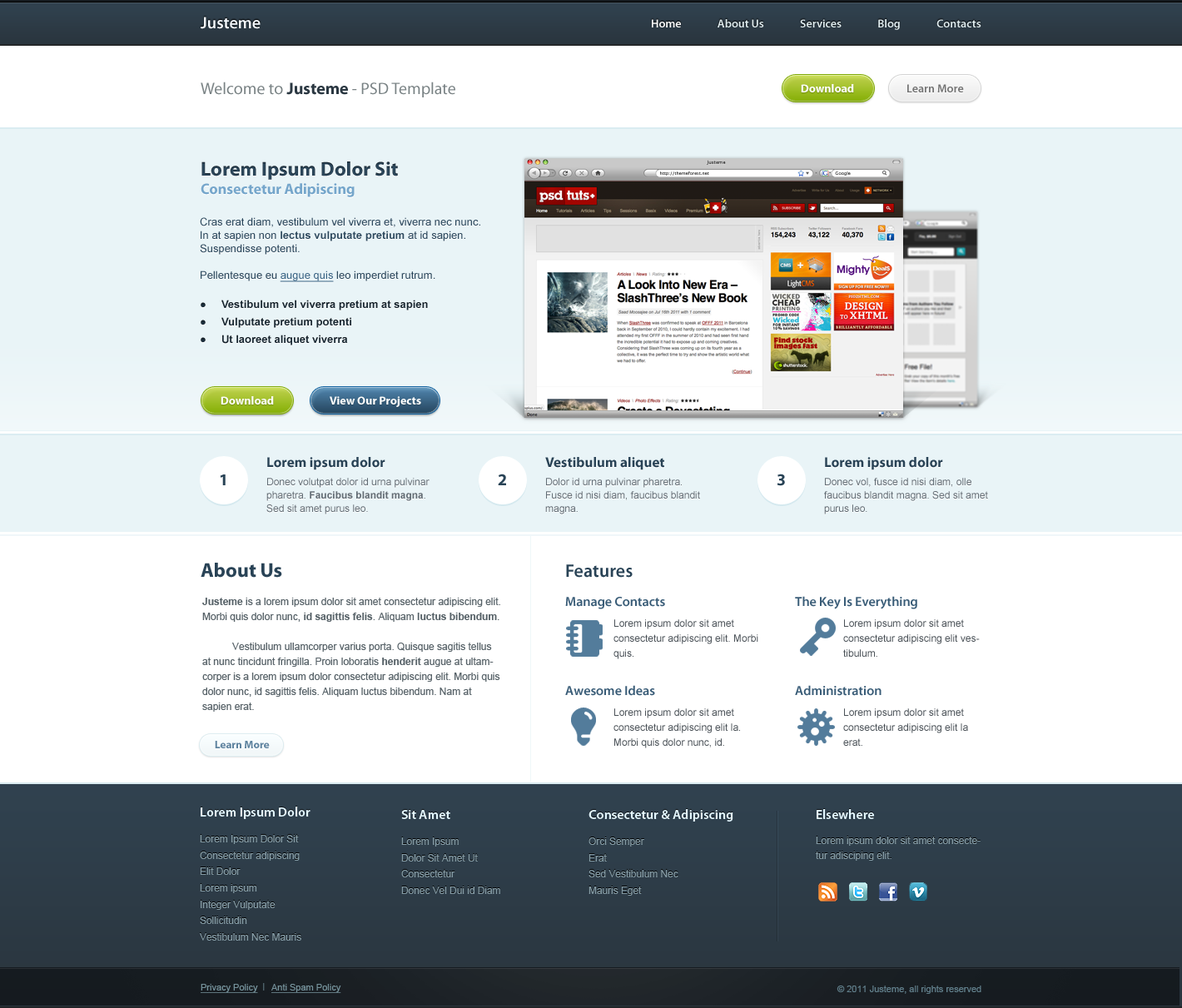
<style>
.page{position:relative;width:1182px;height:1008px;background:#ffffff}
.page>*{position:absolute;margin:0}
.t1{font:16.7px "MyriadPro-Semibold";color:#f5faff}
.t2{font:11.7px "MyriadPro-Semibold";color:#e0edf0}
.t3{font:11.7px "MyriadPro-Semibold";color:#ffffff}
.t4{font:16.7px "MyriadPro-Regular";color:#798284}
.t5{font:16.7px "MyriadPro-Bold";color:#2b3842}
.t6{font:11.7px "MyriadPro-Bold";color:#fffffe}
.t7{font:11.7px "MyriadPro-Semibold";color:#727272}
.t8{font:20px "MyriadPro-Bold";color:#2d495e}
.t9{font:4.8px "LucidaGrande"}
.t10{font:4.4px "LucidaGrande"}
.t11{font:15px "MyriadPro-Bold";color:#75a6cb}
.t12{font:10.8px/13.3px "ArialMT";color:#2d495e}
.t13{font:10.8px/13.3px "Arial-BoldMT";color:#2d495e}
.t14{font:10.8px/13.3px "ArialMT";color:#3a6585;text-decoration:underline}
.t15{font:10.8px/17.5px "Arial-BoldMT";color:#1c2f3d}
.t16{font:14.2px "MyriadPro-Bold";color:#294356}
.t17{font:16.7px "MyriadPro-Bold";color:#294356}
.t18{font:10px/13.3px "ArialMT";color:#636d75}
.t19{font:10px/13.3px "Arial-BoldMT";color:#636d75}
.t20{font:20px "MyriadPro-Bold";color:#294356}
.t21{font:18.3px "MyriadPro-Semibold";color:#294356}
.t22{font:10px/15px "ArialMT";color:#586369}
.t23{font:10px/15px "Arial-BoldMT";color:#586369}
.t24{font:13.3px "MyriadPro-Semibold";color:#395c77}
.t25{font:10px/15px "ArialMT";color:#4b5258}
.t26{font:10.8px "MyriadPro-Bold";color:#5e839f}
.t27{font:13.3px "MyriadPro-Semibold";color:#e3f7ff}
.t28{font:10px "ArialMT";color:#869da7}
.t29{font:10px/15px "ArialMT";color:#869da7}
.t30{font:9.2px "ArialMT";color:#76939c;text-decoration:underline}
.t31{font:10px "ArialMT";color:#4d636a}
.t32{font:9.2px "ArialMT";color:#617f8b}
</style>
<div class="page">
<p class="t1" style="left:201px;top:17px;width:60px;height:12px">Justeme</p>
<p class="t2" style="left:652px;top:19px;width:330px;height:11px"><span class="t3">Home </span>              About Us               Services               Blog               Contacts</p>
<p class="t4" style="left:201px;top:82px;width:254px;height:15px">Welcome to <span class="t5">Justeme</span> - PSD Template</p>
<p class="t6" style="left:801px;top:84px;width:53px;height:8px">Download</p>
<p class="t7" style="left:908px;top:84px;width:56px;height:8px">Learn More</p>
<p class="t8" style="left:202px;top:162px;width:196px;height:18px">Lorem Ipsum Dolor Sit</p>
<p class="t9" style="left:707px;top:160px;width:19px;height:5px">Justeme</p>
<p class="t10" style="left:660px;top:172px;width:49px;height:4px">http://themeforest.net</p>
<p class="t10" style="left:835px;top:172px;width:16px;height:4px">Google</p>
<p class="t11" style="left:201px;top:183px;width:154px;height:14px">Consectetur Adipiscing</p>
<p class="t12" style="left:200px;top:217px;width:280px;height:65px">Cras erat diam, vestibulum vel viverra et, viverra nec nunc. In at sapien non<span class="t13"> lectus vulputate pretium</span> at id sapien. Suspendisse potenti.<br><br>Pellentesque eu <span class="t14">augue quis</span> leo imperdiet rutrum.</p>
<p class="t15" style="left:201px;top:300px;width:227px;height:46px">●     Vestibulum vel viverra pretium at sapien<br>●     Vulputate pretium potenti<br>●     Ut laoreet aliquet viverra</p>
<p class="t6" style="left:221px;top:396px;width:53px;height:9px">Download</p>
<p class="t6" style="left:330px;top:396px;width:91px;height:11px">View Our Projects</p>
<p class="t16" style="left:267px;top:457px;width:119px;height:13px">Lorem ipsum dolor</p>
<p class="t16" style="left:545px;top:457px;width:120px;height:13px">Vestibulum aliquet</p>
<p class="t16" style="left:825px;top:457px;width:118px;height:13px">Lorem ipsum dolor</p>
<p class="t17" style="left:498px;top:474px;width:8px;height:11px">2</p>
<p class="t17" style="left:777px;top:474px;width:8px;height:12px">3</p>
<p class="t17" style="left:220px;top:475px;width:6px;height:10px">1</p>
<p class="t18" style="left:266px;top:478px;width:164px;height:37px">Donec volutpat dolor id urna pulvinar pharetra. <span class="t19">Faucibus blandit magna</span>. Sed sit amet purus leo.</p>
<p class="t18" style="left:545px;top:478px;width:155px;height:37px">Dolor id urna pulvinar pharetra. Fusce id nisi diam, faucibus blandit magna.</p>
<p class="t18" style="left:824px;top:478px;width:164px;height:37px">Donec vol, fusce id nisi diam, olle faucibus blandit magna. Sed sit amet purus leo.</p>
<p class="t20" style="left:201px;top:563px;width:81px;height:15px">About Us</p>
<p class="t21" style="left:566px;top:565px;width:67px;height:13px">Features</p>
<p class="t22" style="left:202px;top:598px;width:298px;height:114px"><span class="t23">Justeme</span> is a lorem ipsum dolor sit amet consectetur adipiscing elit. Morbi quis dolor nunc,<span class="t23"> id sagittis felis</span>. Aliquam<span class="t23"> luctus bibendum</span>. <br><br> Vestibulum ullamcorper varius porta. Quisque sagitis tellus at nunc tincidunt fringilla. Proin loboratis <span class="t23">henderit</span> augue at ultamcorper is a lorem ipsum dolor consectetur adipiscing elit. Morbi quis dolor nunc, id sagittis felis. Aliquam luctus bibendum. Nam at sapien erat.</p>
<p class="t24" style="left:565px;top:597px;width:100px;height:13px">Manage Contacts</p>
<p class="t24" style="left:795px;top:596px;width:123px;height:14px">The Key Is Everything</p>
<p class="t25" style="left:614px;top:620px;width:145px;height:40px">Lorem ipsum dolor sit amet consectetur adipiscing elit. Morbi quis.</p>
<p class="t25" style="left:844px;top:620px;width:136px;height:37px">Lorem ipsum dolor sit amet consectetur adipiscing elit vestibulum.</p>
<p class="t24" style="left:565px;top:685px;width:90px;height:11px">Awesome Ideas</p>
<p class="t24" style="left:795px;top:685px;width:87px;height:11px">Administration</p>
<p class="t25" style="left:614px;top:709px;width:126px;height:40px">Lorem ipsum dolor sit amet consectetur adipiscing elit la. Morbi quis dolor nunc, id.</p>
<p class="t25" style="left:844px;top:709px;width:124px;height:37px">Lorem ipsum dolor sit amet consectetur adipiscing elit la erat.</p>
<p class="t26" style="left:215px;top:741px;width:55px;height:8px">Learn More</p>
<p class="t27" style="left:201px;top:807px;width:110px;height:12px">Lorem Ipsum Dolor</p>
<p class="t27" style="left:589px;top:809px;width:145px;height:13px">Consectetur &amp; Adipiscing</p>
<p class="t27" style="left:817px;top:809px;width:58px;height:10px">Elsewhere</p>
<p class="t27" style="left:401px;top:810px;width:50px;height:9px">Sit Amet</p>
<p class="t28" style="left:200px;top:835px;width:99px;height:9px">Lorem Ipsum Dolor Sit</p>
<p class="t28" style="left:401px;top:838px;width:58px;height:9px">Lorem Ipsum</p>
<p class="t28" style="left:589px;top:838px;width:56px;height:9px">Orci Semper</p>
<p class="t29" style="left:816px;top:837px;width:165px;height:24px">Lorem ipsum dolor sit amet consectetur adisciping elit.</p>
<p class="t28" style="left:200px;top:852px;width:100px;height:9px">Consectetur adipiscing</p>
<p class="t28" style="left:401px;top:854px;width:77px;height:8px">Dolor Sit Amet Ut</p>
<p class="t28" style="left:589px;top:854px;width:18px;height:8px">Erat</p>
<p class="t28" style="left:200px;top:868px;width:41px;height:7px">Elit Dolor</p>
<p class="t28" style="left:401px;top:870px;width:54px;height:8px">Consectetur</p>
<p class="t28" style="left:589px;top:870px;width:90px;height:8px">Sed Vestibulum Nec</p>
<p class="t28" style="left:200px;top:884px;width:57px;height:10px">Lorem ipsum</p>
<p class="t28" style="left:401px;top:887px;width:99px;height:7px">Donec Vel Dui id Diam</p>
<p class="t28" style="left:589px;top:887px;width:53px;height:9px">Mauris Eget</p>
<p class="t28" style="left:201px;top:901px;width:75px;height:9px">Integer Vulputate</p>
<p class="t28" style="left:200px;top:917px;width:47px;height:7px">Sollicitudin</p>
<p class="t28" style="left:200px;top:933px;width:101px;height:8px">Vestibulum Nec Mauris</p>
<p class="t30" style="left:201px;top:984px;width:57px;height:9px">Privacy Policy</p>
<p class="t31" style="left:263px;top:983px;width:2px;height:8px">I</p>
<p class="t30" style="left:271px;top:984px;width:70px;height:9px">Anti Spam Policy</p>
<p class="t32" style="left:837px;top:986px;width:145px;height:8px">© 2011 Justeme, all rights reserved</p>
</div>
